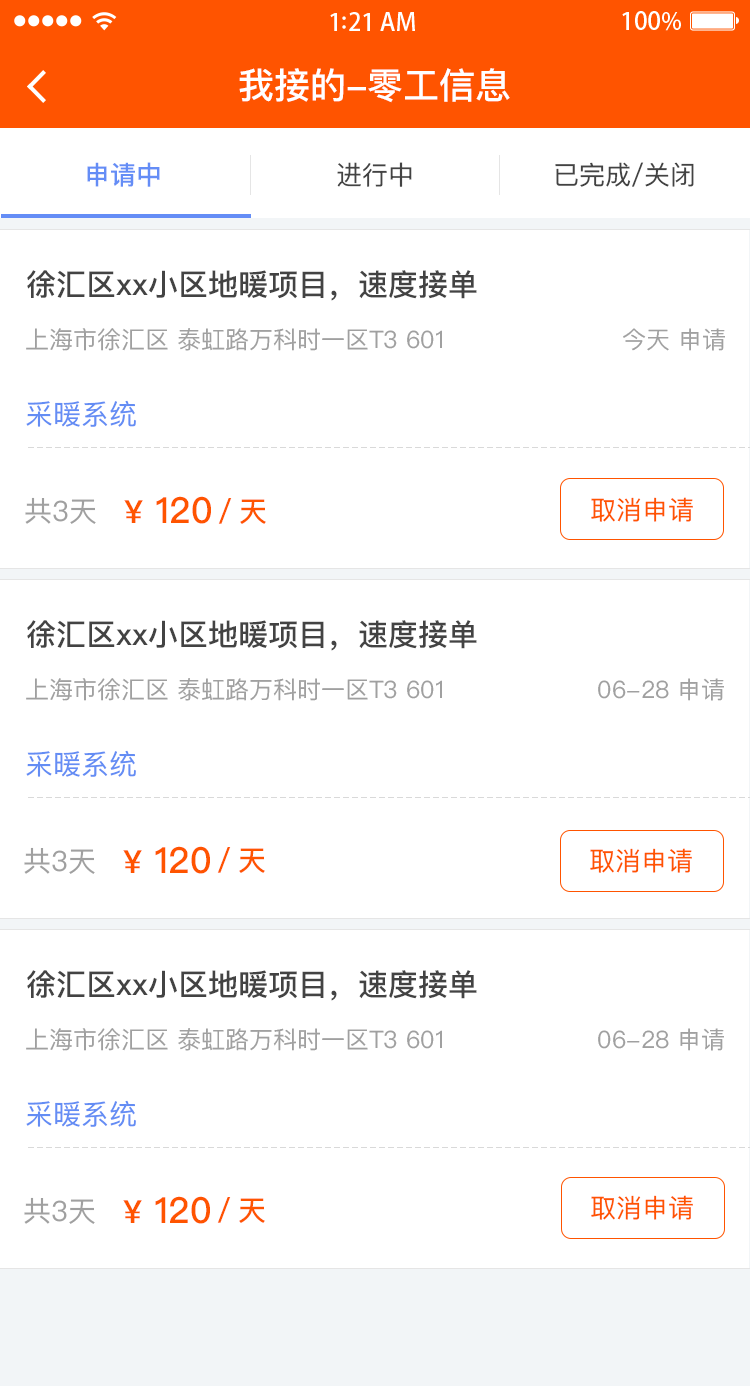
<style>
.page{position:relative;width:750px;height:1386px;background:#ffffff}
.page>*{position:absolute;margin:0}
.t1{font:36px "PingFangSC-Medium";color:#ffffff}
.t2{font:26px "PingFangSC-Medium";color:#648df6}
.t3{font:26px "PingFangSC-Regular";color:#434343}
.t4{font:30px "PingFangSC-Medium";color:#434343}
.t5{font:24px "PingFangSC-Regular";color:#a0a0a0}
.t6{font:28px "PingFangSC-Regular";color:#648df4}
.t7{font:28px "PingFangSC-Regular";color:#a0a0a0}
.t8{font:36px "PingFangSC-Medium";color:#ff5400}
.t9{font:32px "PingFangSC-Medium";color:#ff5400}
.t10{font:26px "PingFangSC-Regular";color:#ff5400}
.t11{font:28px "PingFangSC-Medium";color:#ff5400}
</style>
<div class="page">
<p class="t1" style="left:239px;top:68px;width:271px;height:35px">我接的-零工信息</p>
<p class="t2" style="left:87px;top:162px;width:73px;height:25px">申请中</p>
<p class="t3" style="left:337px;top:162px;width:75px;height:25px">进行中</p>
<p class="t3" style="left:555px;top:162px;width:139px;height:25px">已完成/关闭</p>
<p class="t4" style="left:27px;top:270px;width:450px;height:31px">徐汇区xx小区地暖项目，速度接单</p>
<p class="t5" style="left:26px;top:328px;width:416px;height:23px">上海市徐汇区 泰虹路万科时一区T3 601</p>
<p class="t5" style="left:623px;top:328px;width:102px;height:23px">今天 申请</p>
<p class="t6" style="left:26px;top:400px;width:110px;height:27px">采暖系统</p>
<p class="t7" style="left:25px;top:497px;width:71px;height:27px">共3天</p>
<p class="t8" style="left:124px;top:496px;width:87px;height:28px"><span class="t9">¥</span> 120</p>
<p class="t10" style="left:591px;top:497px;width:102px;height:25px">取消申请</p>
<p class="t11" style="left:218px;top:498px;width:48px;height:26px">／天</p>
<p class="t4" style="left:27px;top:620px;width:450px;height:31px">徐汇区xx小区地暖项目，速度接单</p>
<p class="t5" style="left:26px;top:678px;width:416px;height:23px">上海市徐汇区 泰虹路万科时一区T3 601</p>
<p class="t5" style="left:598px;top:678px;width:126px;height:23px">06-28 申请</p>
<p class="t6" style="left:26px;top:750px;width:110px;height:27px">采暖系统</p>
<p class="t8" style="left:123px;top:846px;width:87px;height:28px"><span class="t9">¥</span> 120</p>
<p class="t7" style="left:24px;top:847px;width:71px;height:27px">共3天</p>
<p class="t11" style="left:217px;top:847px;width:48px;height:26px">／天</p>
<p class="t10" style="left:590px;top:848px;width:102px;height:25px">取消申请</p>
<p class="t4" style="left:27px;top:970px;width:450px;height:31px">徐汇区xx小区地暖项目，速度接单</p>
<p class="t5" style="left:26px;top:1028px;width:416px;height:23px">上海市徐汇区 泰虹路万科时一区T3 601</p>
<p class="t5" style="left:598px;top:1028px;width:126px;height:23px">06-28 申请</p>
<p class="t6" style="left:26px;top:1100px;width:110px;height:27px">采暖系统</p>
<p class="t7" style="left:24px;top:1197px;width:71px;height:27px">共3天</p>
<p class="t8" style="left:123px;top:1196px;width:87px;height:28px"><span class="t9">¥</span> 120</p>
<p class="t11" style="left:217px;top:1197px;width:48px;height:26px">／天</p>
<p class="t10" style="left:591px;top:1195px;width:102px;height:25px">取消申请</p>
</div>
